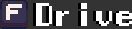
<style>
.page{position:relative;width:132px;height:29px;background:#333333}
.page>*{position:absolute;margin:0}
.t1{font:30px "ManaspaceReg";color:#ffffff}
</style>
<div class="page">
<p class="t1" style="left:36px;top:3px;width:96px;height:23px">Drive</p>
</div>
